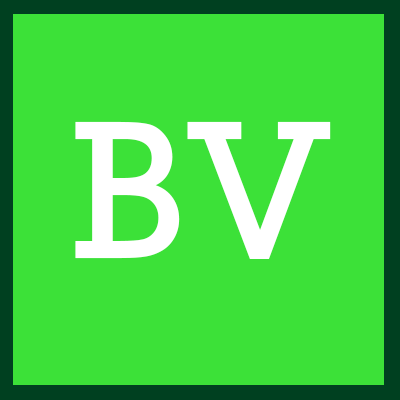
<style>
.page{position:relative;width:400px;height:400px;background:#3ce138}
.page>*{position:absolute;margin:0}
.t1{font:200px "Rockwell";color:#ffffff}
</style>
<div class="page">
<p class="t1" style="left:75px;top:121px;width:256px;height:138px">BV</p>
</div>
